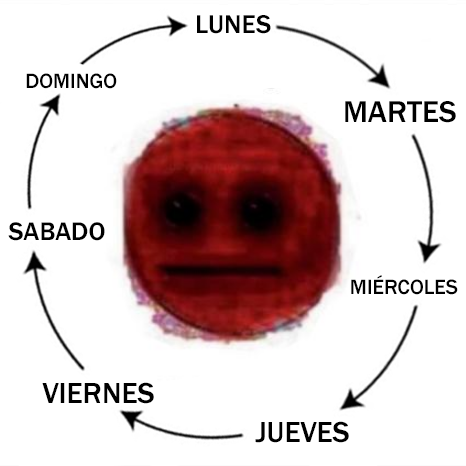
<style>
.page{position:relative;width:466px;height:466px;background:#ffffff}
.page>*{position:absolute;margin:0}
.t1{font:26.8px "FranklinGothic-Medium";color:#000000}
.t2{font:21.3px "FranklinGothic-Medium";color:#000000}
.t3{font:31.3px "FranklinGothic-Medium";color:#000000}
.t4{font:26.3px "FranklinGothic-Medium";color:#000000}
.t5{font:30px "FranklinGothic-Medium";color:#000000}
</style>
<div class="page">
<p class="t1" style="left:197px;top:15px;width:74px;height:19px">LUNES</p>
<p class="t2" style="left:26px;top:73px;width:91px;height:16px">DOMINGO</p>
<p class="t3" style="left:345px;top:101px;width:111px;height:22px">MARTES</p>
<p class="t4" style="left:8px;top:222px;width:97px;height:19px">SABADO</p>
<p class="t2" style="left:351px;top:275px;width:107px;height:20px">MIÉRCOLES</p>
<p class="t5" style="left:42px;top:382px;width:112px;height:22px">VIERNES</p>
<p class="t5" style="left:255px;top:421px;width:94px;height:22px">JUEVES</p>
</div>
